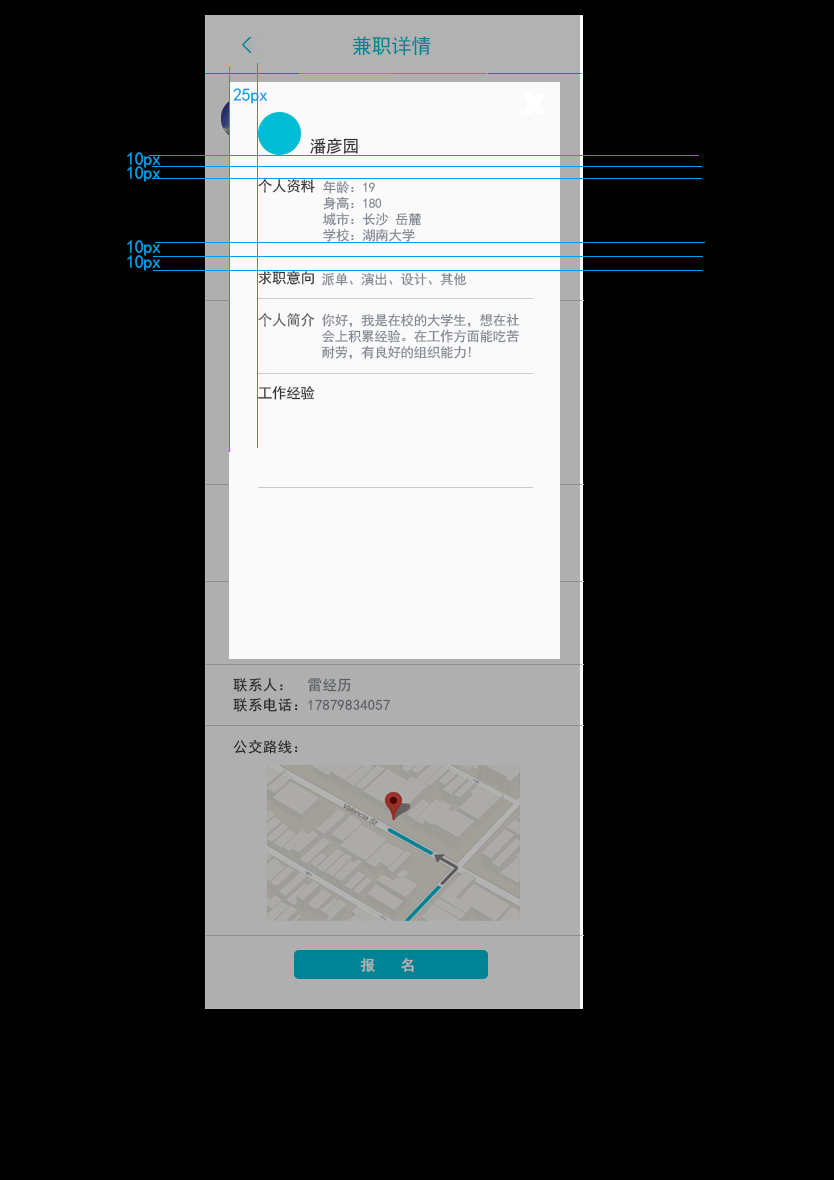
<style>
.page{position:relative;width:834px;height:1180px;background:#000000}
.page>*{position:absolute;margin:0}
.t1{font:20.1px "SimHei";letter-spacing:-0.02em;color:#008394}
.t2{font:18px "SimHei";letter-spacing:-0.02em;color:#00a0e9}
.t3{font:16.8px "SimHei";letter-spacing:-0.02em;color:#2e3031}
.t4{font:14.5px "SimHei";letter-spacing:-0.02em;color:#2e3031}
.t5{font:13.4px "SimHei";letter-spacing:-0.02em;color:#808792}
.t6{font:14.5px "SimHei";letter-spacing:-0.02em;color:#5d5d5d}
.t7{font:14.5px/20.1px "SimHei";letter-spacing:0.02em}
.t8{font:14.5px "SimHei";letter-spacing:0.02em;color:#2e3031}
.t9{font:14.5px "SimHei";letter-spacing:0.02em;color:#b2b2b2;font-weight:bold}
</style>
<div class="page">
<p class="t1" style="left:352px;top:36px;width:79px;height:20px">兼职详情</p>
<p class="t2" style="left:233px;top:88px;width:35px;height:16px">25px</p>
<p class="t3" style="left:310px;top:138px;width:48px;height:16px">潘彦园</p>
<p class="t2" style="left:127px;top:152px;width:34px;height:16px">10px</p>
<p class="t2" style="left:127px;top:166px;width:34px;height:16px">10px</p>
<p class="t4" style="left:258px;top:179px;width:57px;height:14px">个人资料</p>
<p class="t5" style="left:323px;top:180px;width:98px;height:62px">年龄：19<br>身高：180<br>城市：长沙 岳麓<br>学校：湖南大学</p>
<p class="t2" style="left:127px;top:240px;width:34px;height:16px">10px</p>
<p class="t2" style="left:127px;top:255px;width:34px;height:16px">10px</p>
<p class="t4" style="left:258px;top:271px;width:56px;height:14px">求职意向</p>
<p class="t5" style="left:322px;top:272px;width:145px;height:14px">派单、演出、设计、其他</p>
<p class="t6" style="left:258px;top:313px;width:57px;height:14px">个人简介</p>
<p class="t5" style="left:322px;top:313px;width:198px;height:47px">你好，我是在校的大学生，想在社会上积累经验。在工作方面能吃苦耐劳，有良好的组织能力!</p>
<p class="t4" style="left:258px;top:386px;width:57px;height:14px">工作经验</p>
<p class="t7" style="left:233px;top:678px;width:157px;height:34px">联系人：  雷经历<br>联系电话：17879834057</p>
<p class="t8" style="left:233px;top:739px;width:65px;height:15px">公交路线：</p>
<p class="t9" style="left:360px;top:958px;width:54px;height:14px">报  名</p>
</div>
